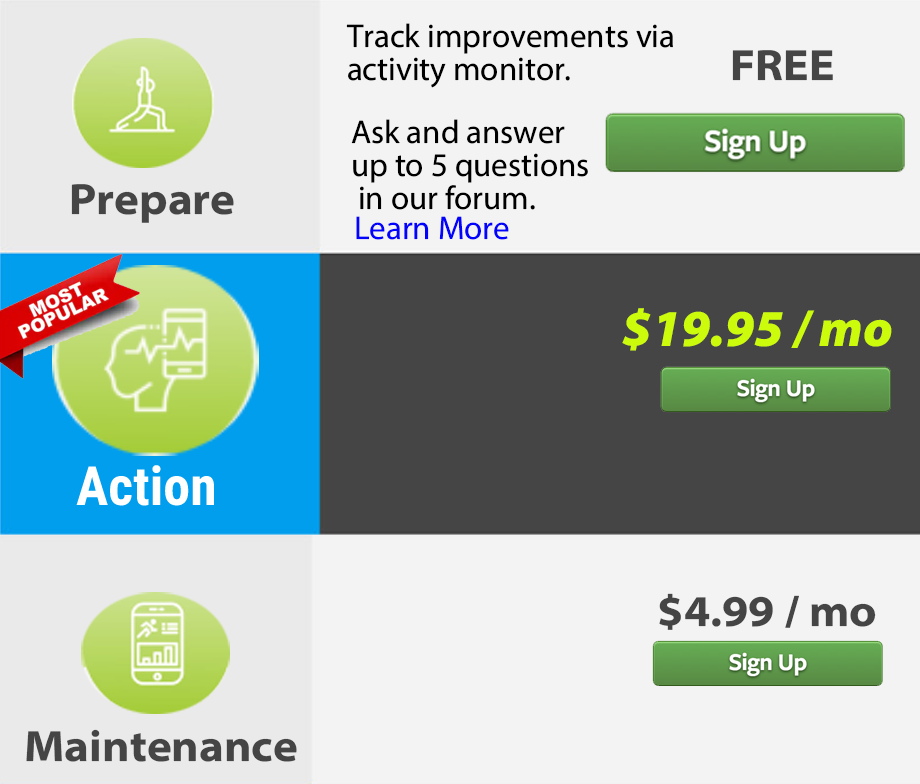
<style>
.page{position:relative;width:920px;height:784px;background:#f3f3f3}
.page>*{position:absolute;margin:0}
.t1{font:33px/33px "MyriadConceptRoman-Regular";color:#000000}
.t2{font:44px "MyriadConceptRoman-BoldSemiExtended";color:#454545}
.t3{font:33px "MyriadConceptRoman-Regular";color:#0303fb}
.t4{font:52px "MyriadConceptItalic-BlackItalic";color:#ccfc0c}
.t5{font:54px "RobotoCondensed-Bold";color:#feffff}
</style>
<div class="page">
<p class="t1" style="left:346px;top:23px;width:327px;height:65px">Track improvements via<br>activity monitor.</p>
<p class="t2" style="left:732px;top:50px;width:101px;height:31px">FREE</p>
<p class="t1" style="left:351px;top:119px;width:237px;height:91px">Ask and answer <br>up to 5 questions<br> in our forum.</p>
<p class="t2" style="left:71px;top:184px;width:163px;height:39px">Prepare</p>
<p class="t3" style="left:356px;top:216px;width:153px;height:24px">Learn More</p>
<p class="t4" style="left:622px;top:308px;width:270px;height:43px">$19.95 / mo</p>
<p class="t5" style="left:76px;top:465px;width:138px;height:41px">Action</p>
<p class="t2" style="left:659px;top:593px;width:217px;height:37px">$4.99 / mo</p>
<p class="t2" style="left:26px;top:729px;width:271px;height:33px">Maintenance</p>
</div>
